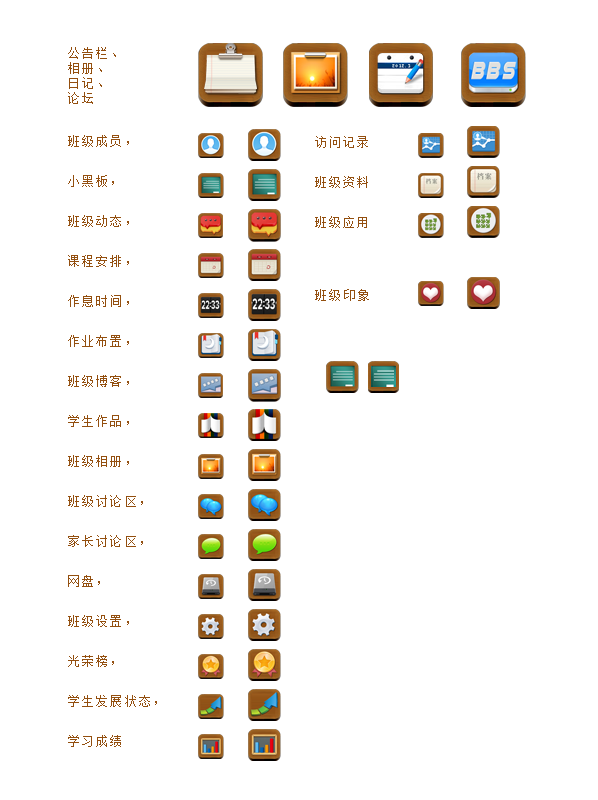
<style>
.page{position:relative;width:598px;height:800px;background:#ffffff}
.page>*{position:absolute;margin:0}
.t1{font:12px/15px "SimSun";letter-spacing:0.18em;color:#934f0f}
.t2{font:12px/40px "SimSun";letter-spacing:0.18em;color:#934f0f}
.t3{font:12px "SimSun";letter-spacing:0.2em;color:#934f0f}
</style>
<div class="page">
<p class="t1" style="left:68px;top:47px;width:48px;height:57px">公告栏、<br>相册、<br>日记、<br>论坛</p>
<p class="t2" style="left:68px;top:135px;width:89px;height:612px">班级成员，<br>小黑板，<br>班级动态，<br>课程安排，<br>作息时间，<br>作业布置，<br>班级博客，<br>学生作品，<br>班级相册，<br>班级讨论区，<br>家长讨论区，<br>网盘，<br>班级设置，<br>光荣榜，<br>学生发展状态，<br>学习成绩</p>
<p class="t2" style="left:315px;top:136px;width:53px;height:92px">访问记录<br>班级资料<br>班级应用</p>
<p class="t3" style="left:315px;top:289px;width:54px;height:12px">班级印象</p>
</div>
